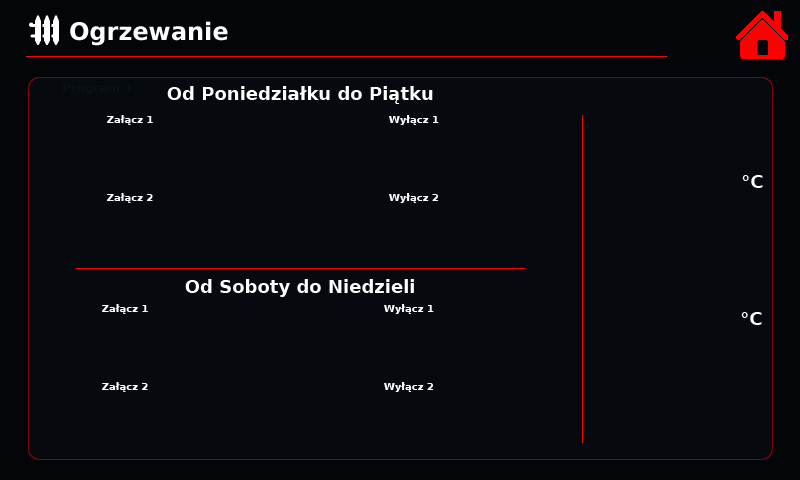
<style>
.page{position:relative;width:800px;height:480px;background:#06090d}
.page>*{position:absolute;margin:0}
.t1{font:24px "DejaVuSans-Bold";color:#ffffff}
.t2{font:12px "DejaVuSans-Bold";color:#0b1017}
.t3{font:18px "DejaVuSans-Bold";color:#ffffff}
.t4{font:10px "DejaVuSans-Bold";color:#ffffff}
</style>
<div class="page">
<p class="t1" style="left:70px;top:21px;width:158px;height:25px">Ogrzewanie</p>
<p class="t2" style="left:63px;top:83px;width:69px;height:12px">Program 1</p>
<p class="t3" style="left:167px;top:86px;width:266px;height:18px">Od Poniedziałku do Piątku</p>
<p class="t4" style="left:107px;top:115px;width:46px;height:10px">Załącz 1</p>
<p class="t4" style="left:389px;top:115px;width:50px;height:10px">Wyłącz 1</p>
<p class="t3" style="left:742px;top:175px;width:21px;height:13px">°C</p>
<p class="t4" style="left:107px;top:193px;width:46px;height:10px">Załącz 2</p>
<p class="t4" style="left:389px;top:193px;width:49px;height:10px">Wyłącz 2</p>
<p class="t3" style="left:185px;top:279px;width:229px;height:18px">Od Soboty do Niedzieli</p>
<p class="t4" style="left:102px;top:304px;width:46px;height:10px">Załącz 1</p>
<p class="t4" style="left:384px;top:304px;width:50px;height:10px">Wyłącz 1</p>
<p class="t3" style="left:741px;top:312px;width:21px;height:13px">°C</p>
<p class="t4" style="left:102px;top:382px;width:46px;height:10px">Załącz 2</p>
<p class="t4" style="left:384px;top:382px;width:49px;height:10px">Wyłącz 2</p>
</div>
